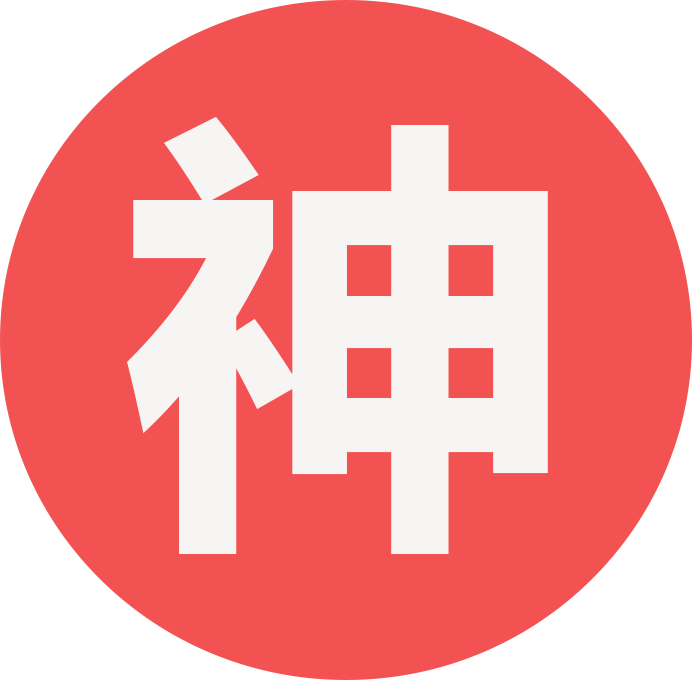
<style>
.page{position:relative;width:692px;height:680px;background:#f25252}
.page>*{position:absolute;margin:0}
.t1{font:450.4px "MicrosoftYaHei-Bold";color:#f7f4f4}
</style>
<div class="page">
<p class="t1" style="left:127px;top:117px;width:421px;height:437px">神</p>
</div>
